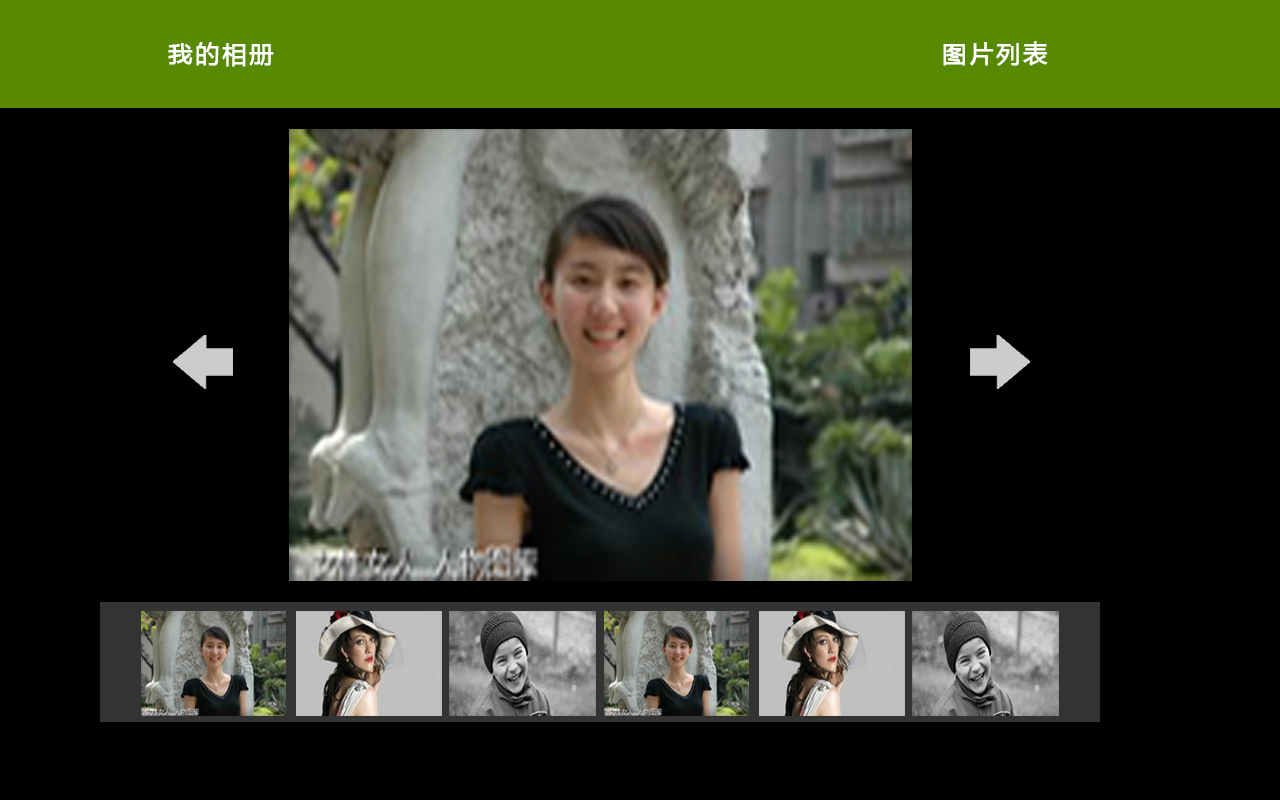
<style>
.page{position:relative;width:1280px;height:800px;background:#000000}
.page>*{position:absolute;margin:0}
.t1{font:24px "MicrosoftYaHei";letter-spacing:0.1em;color:#ffffff;font-weight:bold}
</style>
<div class="page">
<p class="t1" style="left:943px;top:41px;width:105px;height:25px">图片列表</p>
<p class="t1" style="left:168px;top:42px;width:106px;height:25px">我的相册</p>
</div>
